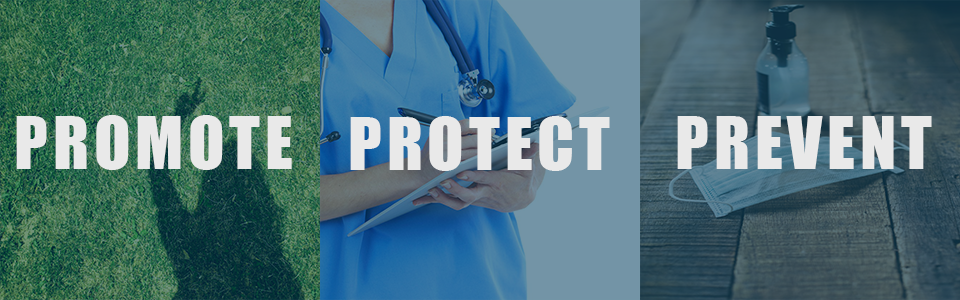
<style>
.page{position:relative;width:960px;height:300px}
.page>*{position:absolute;margin:0}
.t1{font:66.7px "Impact";letter-spacing:0.075em;color:#e9e9e9}
</style>
<div class="page">
<p class="t1" style="left:16px;top:115px;width:276px;height:55px">PROMOTE</p>
<p class="t1" style="left:350px;top:116px;width:260px;height:55px">PROTECT</p>
<p class="t1" style="left:677px;top:116px;width:255px;height:53px">PREVENT</p>
</div>
